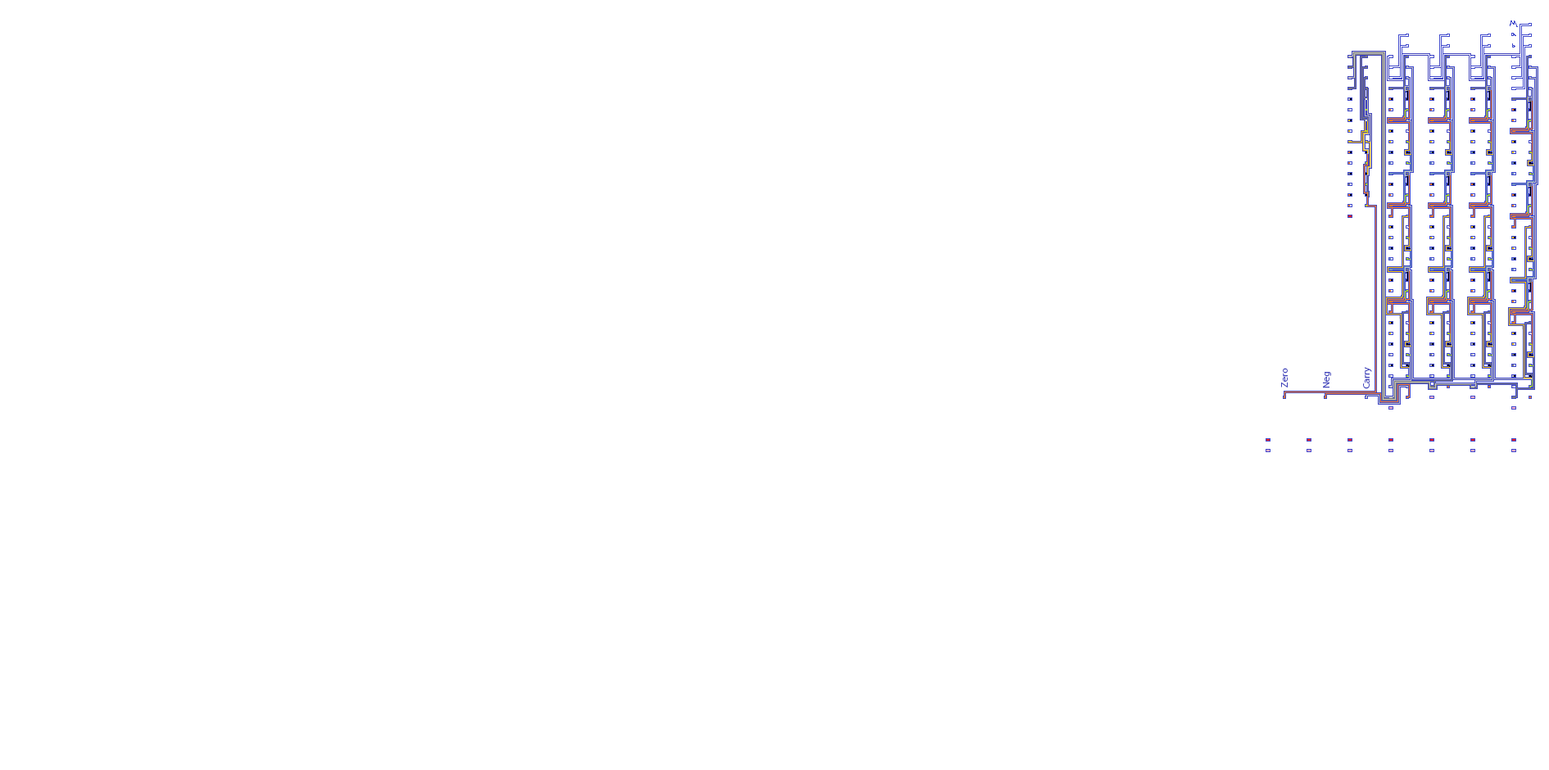
<style>
.page{position:relative;width:1549px;height:770px;background:#ffffff}
.page>*{position:absolute;margin:0}
.t1{font:9.8px "MyriadPro-Regular";color:#4043bc}
</style>
<div class="page">
<p class="t1" style="left:1281px;top:368px;width:7px;height:19px;rotate:-90deg">Zero</p>
<p class="t1" style="left:1323px;top:372px;width:8px;height:16px;rotate:-90deg">Neg</p>
<p class="t1" style="left:1363px;top:367px;width:9px;height:22px;rotate:-90deg">Carry</p>
</div>
